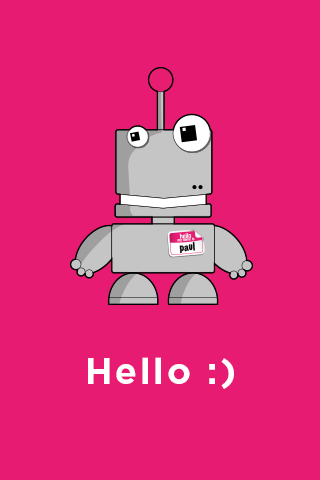
<style>
.page{position:relative;width:320px;height:480px;background:#e61b71}
.page>*{position:absolute;margin:0}
.t1{font:36px "Gotham-Bold";letter-spacing:0.075em;color:#ffffff}
</style>
<div class="page">
<p class="t1" style="left:88px;top:357px;width:146px;height:32px">Hello :)</p>
</div>
